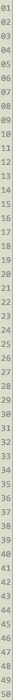
<style>
.page{position:relative;width:19px;height:700px;background:#d8ddcc}
.page>*{position:absolute;margin:0}
.t1{font:9px/14px "Consolas";color:#8b8d87}
</style>
<div class="page">
<p class="t1" style="left:1px;top:5px;width:10px;height:693px;text-align:justify">01<br>02<br>03<br>04<br>05<br>06<br>07<br>08<br>09<br>10<br>11<br>12<br>13<br>14<br>15<br>16<br>17<br>18<br>19<br>20<br>21<br>22<br>23<br>24<br>25<br>26<br>27<br>28<br>29<br>30<br>31<br>32<br>33<br>34<br>35<br>36<br>37<br>38<br>39<br>40<br>41<br>42<br>43<br>44<br>45<br>46<br>47<br>48<br>49<br>50</p>
</div>
